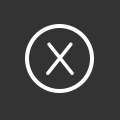
<style>
.page{position:relative;width:120px;height:120px;background:#333333}
.page>*{position:absolute;margin:0}
.t1{font:72px "Puppy";color:#ffffff}
</style>
<div class="page">
<p class="t1" style="left:46px;top:42px;width:28px;height:33px">x</p>
</div>
